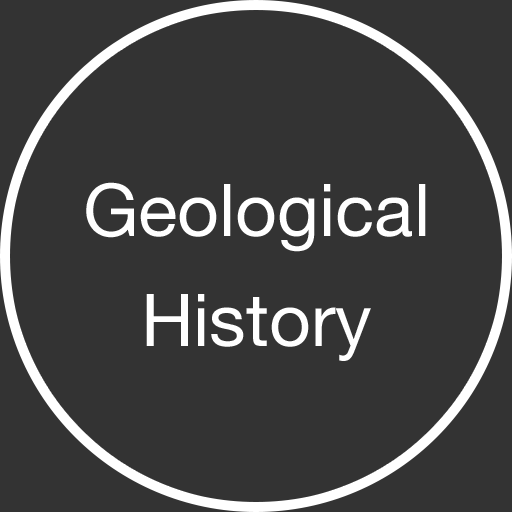
<style>
.page{position:relative;width:512px;height:512px;background:#333333}
.page>*{position:absolute;margin:0}
.t1{font:73px "HelveticaNeue";color:#ffffff}
</style>
<div class="page">
<p class="t1" style="left:86px;top:182px;width:340px;height:179px;text-align:center">Geological<br>History</p>
</div>
